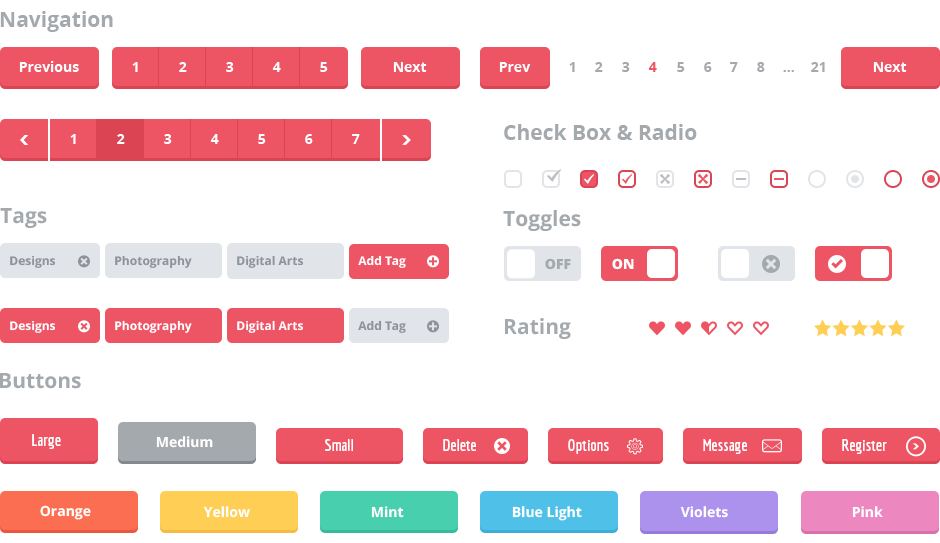
<style>
.page{position:relative;width:940px;height:543px;background:#ffffff}
.page>*{position:absolute;margin:0}
.t1{font:21px "OpenSans-Bold";color:#a4a9ae}
.t2{font:14px "OpenSans-Bold";color:#ffffff}
.t3{font:14px "OpenSans-Bold";color:#a4a9ae}
.t4{font:14px "OpenSans-Bold";color:#ed5565}
.t5{font:12px "OpenSans-Bold";color:#8f9399}
.t6{font:12px "OpenSans-Bold";color:#ffffff}
.t7{font:14px "OpenSans-Extrabold";color:#a4a9ae}
.t8{font:14px "OpenSans-Extrabold";color:#ffffff}
.t9{font:16px "Economica-Bold";color:#ffffff}
</style>
<div class="page">
<p class="t1" style="left:0px;top:11px;width:113px;height:21px">Navigation</p>
<p class="t2" style="left:19px;top:61px;width:60px;height:11px">Previous</p>
<p class="t2" style="left:132px;top:62px;width:6px;height:10px">1</p>
<p class="t2" style="left:179px;top:62px;width:8px;height:10px">2</p>
<p class="t2" style="left:226px;top:62px;width:8px;height:10px">3</p>
<p class="t2" style="left:272px;top:62px;width:9px;height:10px">4</p>
<p class="t2" style="left:320px;top:62px;width:8px;height:10px">5</p>
<p class="t2" style="left:393px;top:62px;width:34px;height:10px">Next</p>
<p class="t2" style="left:499px;top:62px;width:32px;height:10px">Prev</p>
<p class="t3" style="left:569px;top:62px;width:6px;height:10px">1</p>
<p class="t3" style="left:595px;top:62px;width:8px;height:10px">2</p>
<p class="t3" style="left:622px;top:62px;width:8px;height:10px">3</p>
<p class="t4" style="left:648px;top:62px;width:9px;height:10px">4</p>
<p class="t3" style="left:677px;top:62px;width:8px;height:10px">5</p>
<p class="t3" style="left:704px;top:62px;width:8px;height:10px">6</p>
<p class="t3" style="left:730px;top:62px;width:8px;height:10px">7</p>
<p class="t3" style="left:757px;top:62px;width:8px;height:10px">8</p>
<p class="t3" style="left:811px;top:62px;width:14px;height:10px">21</p>
<p class="t2" style="left:873px;top:62px;width:34px;height:10px">Next</p>
<p class="t3" style="left:783px;top:70px;width:11px;height:2px">...</p>
<p class="t1" style="left:504px;top:124px;width:193px;height:16px">Check Box &amp; Radio</p>
<p class="t2" style="left:70px;top:134px;width:6px;height:10px">1</p>
<p class="t2" style="left:117px;top:134px;width:8px;height:10px">2</p>
<p class="t2" style="left:164px;top:134px;width:8px;height:10px">3</p>
<p class="t2" style="left:210px;top:134px;width:9px;height:10px">4</p>
<p class="t2" style="left:258px;top:134px;width:8px;height:10px">5</p>
<p class="t2" style="left:305px;top:134px;width:8px;height:10px">6</p>
<p class="t2" style="left:352px;top:134px;width:8px;height:10px">7</p>
<p class="t1" style="left:0px;top:208px;width:47px;height:20px">Tags</p>
<p class="t1" style="left:503px;top:210px;width:78px;height:21px">Toggles</p>
<p class="t5" style="left:10px;top:256px;width:45px;height:12px">Designs</p>
<p class="t5" style="left:115px;top:255px;width:77px;height:14px">Photography</p>
<p class="t5" style="left:237px;top:255px;width:66px;height:13px">Digital Arts</p>
<p class="t6" style="left:358px;top:255px;width:48px;height:13px">Add Tag</p>
<p class="t7" style="left:545px;top:258px;width:26px;height:12px">OFF</p>
<p class="t8" style="left:612px;top:258px;width:22px;height:12px">ON</p>
<p class="t1" style="left:505px;top:318px;width:66px;height:21px">Rating</p>
<p class="t6" style="left:10px;top:321px;width:45px;height:12px">Designs</p>
<p class="t6" style="left:115px;top:320px;width:77px;height:14px">Photography</p>
<p class="t6" style="left:237px;top:320px;width:66px;height:13px">Digital Arts</p>
<p class="t5" style="left:358px;top:320px;width:48px;height:13px">Add Tag</p>
<p class="t1" style="left:0px;top:373px;width:81px;height:16px">Buttons</p>
<p class="t9" style="left:32px;top:434px;width:29px;height:15px">Large</p>
<p class="t2" style="left:156px;top:436px;width:57px;height:12px">Medium</p>
<p class="t9" style="left:325px;top:439px;width:28px;height:12px">Small</p>
<p class="t9" style="left:443px;top:439px;width:33px;height:12px">Delete</p>
<p class="t9" style="left:568px;top:439px;width:41px;height:15px">Options</p>
<p class="t9" style="left:703px;top:439px;width:44px;height:15px">Message</p>
<p class="t9" style="left:842px;top:439px;width:45px;height:15px">Register</p>
<p class="t2" style="left:40px;top:505px;width:51px;height:15px">Orange</p>
<p class="t2" style="left:203px;top:506px;width:47px;height:12px">Yellow</p>
<p class="t2" style="left:371px;top:506px;width:33px;height:12px">Mint</p>
<p class="t2" style="left:512px;top:506px;width:70px;height:15px">Blue Light</p>
<p class="t2" style="left:680px;top:506px;width:48px;height:12px">Violets</p>
<p class="t2" style="left:852px;top:506px;width:31px;height:12px">Pink</p>
</div>
